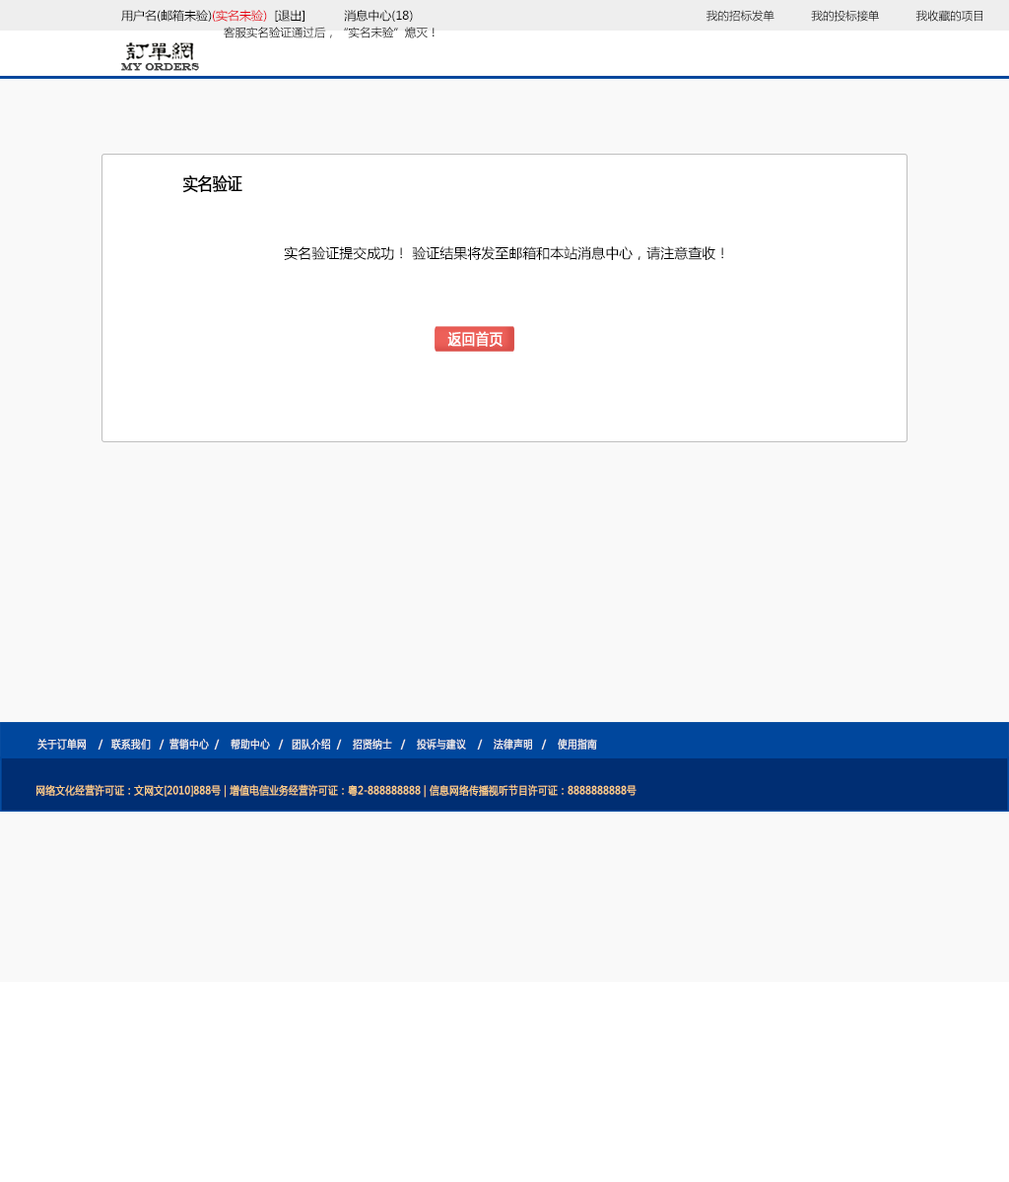
<style>
.page{position:relative;width:1009px;height:1182px;background:#f9f9f9}
.page>*{position:absolute;margin:0}
.t1{font:11.8px "MicrosoftYaHei";color:#000000}
.t2{font:11.8px "MicrosoftYaHei";color:#e60012}
.t3{font:11.3px "MicrosoftYaHei";color:#000000}
.t4{font:10.8px "EngraversMT";color:#434343;font-variant:small-caps;font-weight:bold;scale:0.86 1}
.t5{font:17.2px "MicrosoftYaHei";color:#000000;font-variant:small-caps;font-weight:bold;scale:0.86 1}
.t6{font:13.8px "MicrosoftYaHei";color:#000000}
.t7{font:15.2px "MicrosoftYaHei";color:#ffffff;font-variant:small-caps;font-weight:bold;scale:0.86 1}
.t8{font:10.8px "MicrosoftYaHei";color:#eeeeee;font-variant:small-caps;font-weight:bold;scale:0.86 1}
.t9{font:15.2px "STXihei";color:#eeeeee;font-variant:small-caps;font-weight:bold;scale:0.86 1}
.t10{font:10.8px "MicrosoftYaHei";color:#facd89;font-variant:small-caps;font-weight:bold;scale:0.87 1}
.t11{font:10.8px "MicrosoftYaHei";color:#eeeeee;font-variant:small-caps;font-weight:bold;scale:0.87 1}
</style>
<div class="page">
<p class="t1" style="left:121px;top:10px;width:292px;height:12px">用户名(邮箱未验)<span class="t2">(实名未验) </span> [退出]           消息中心(18)</p>
<p class="t3" style="left:706px;top:10px;width:276px;height:12px">我的招标发单           我的投标接单           我收藏的项目</p>
<p class="t3" style="left:224px;top:27px;width:210px;height:11px">客服实名验证通过后，“实名未验”熄灭！</p>
<p class="t4" style="left:121px;top:63px;width:78px;height:8px">MY ORDERS</p>
<p class="t5" style="left:182px;top:175px;width:60px;height:18px">实名验证</p>
<p class="t6" style="left:284px;top:246px;width:439px;height:14px">实名验证提交成功！ 验证结果将发至邮箱和本站消息中心，请注意查收！</p>
<p class="t7" style="left:447px;top:331px;width:55px;height:16px">返回首页</p>
<p class="t8" style="left:37px;top:738px;width:560px;height:12px"><span class="t9"><br><br></span>关于订单网    /   联系我们   /  营销中心  /    帮助中心   /   团队介绍  /    招贤纳士   /    投诉与建议    /    法律声明   /    使用指南</p>
<p class="t10" style="left:36px;top:784px;width:600px;height:14px"><span class="t11"> </span>网络文化经营许可证：文网文[2010]888号 | 增值电信业务经营许可证：粤2-888888888 | 信息网络传播视听节目许可证：8888888888号</p>
</div>
